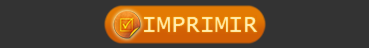
<style>
.page{position:relative;width:369px;height:48px;background:#333333}
.page>*{position:absolute;margin:0}
.t1{font:24px "LucidaConsole";color:#ffe7a3}
</style>
<div class="page">
<p class="t1" style="left:144px;top:17px;width:114px;height:15px">IMPRIMIR</p>
</div>
